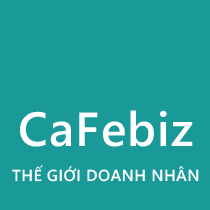
<style>
.page{position:relative;width:210px;height:210px;background:#199998}
.page>*{position:absolute;margin:0}
.t1{font:48px "SegoeWP-Semibold";letter-spacing:0.025em;color:#ffffff}
.t2{font:16px "SegoeWP-Semibold";letter-spacing:0.025em;color:#fefefe}
</style>
<div class="page">
<p class="t1" style="left:20px;top:110px;width:173px;height:37px">CaFebiz</p>
<p class="t2" style="left:12px;top:165px;width:187px;height:17px">THẾ GIỚI DOANH NHÂN</p>
</div>
